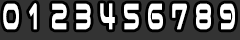
<style>
.page{position:relative;width:240px;height:40px;background:#333333}
.page>*{position:absolute;margin:0}
.t1{font:43.9px "NicoKaku";letter-spacing:0.315em;color:#ffffff;scale:0.5 1}
</style>
<div class="page">
<p class="t1" style="left:3px;top:3px;width:232px;height:27px">0123456789</p>
</div>
